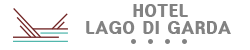
<style>
.page{position:relative;width:250px;height:50px;background:#ffffff}
.page>*{position:absolute;margin:0}
.t1{font:15px "HeadlineR-HM";color:#828282}
</style>
<div class="page">
<p class="t1" style="left:133px;top:4px;width:55px;height:13px">HOTEL</p>
<p class="t1" style="left:86px;top:21px;width:145px;height:13px">LAGO DI GARDA</p>
</div>
